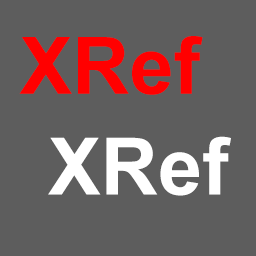
<style>
.page{position:relative;width:256px;height:256px;background:#5d5d5d}
.page>*{position:absolute;margin:0}
.t1{font:79.3px "Arial-BoldMT";color:#ff0000}
.t2{font:79.3px "Arial-BoldMT";color:#ffffff}
</style>
<div class="page">
<p class="t1" style="left:19px;top:36px;width:184px;height:59px">XRef</p>
<p class="t2" style="left:48px;top:136px;width:183px;height:60px">XRef</p>
</div>
